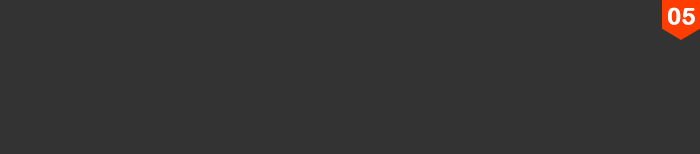
<style>
.page{position:relative;width:700px;height:154px;background:#333333}
.page>*{position:absolute;margin:0}
.t1{font:23px "ArialRoundedMTBold";color:#ffffff;font-weight:bold}
</style>
<div class="page">
<p class="t1" style="left:668px;top:7px;width:27px;height:18px">05</p>
</div>
